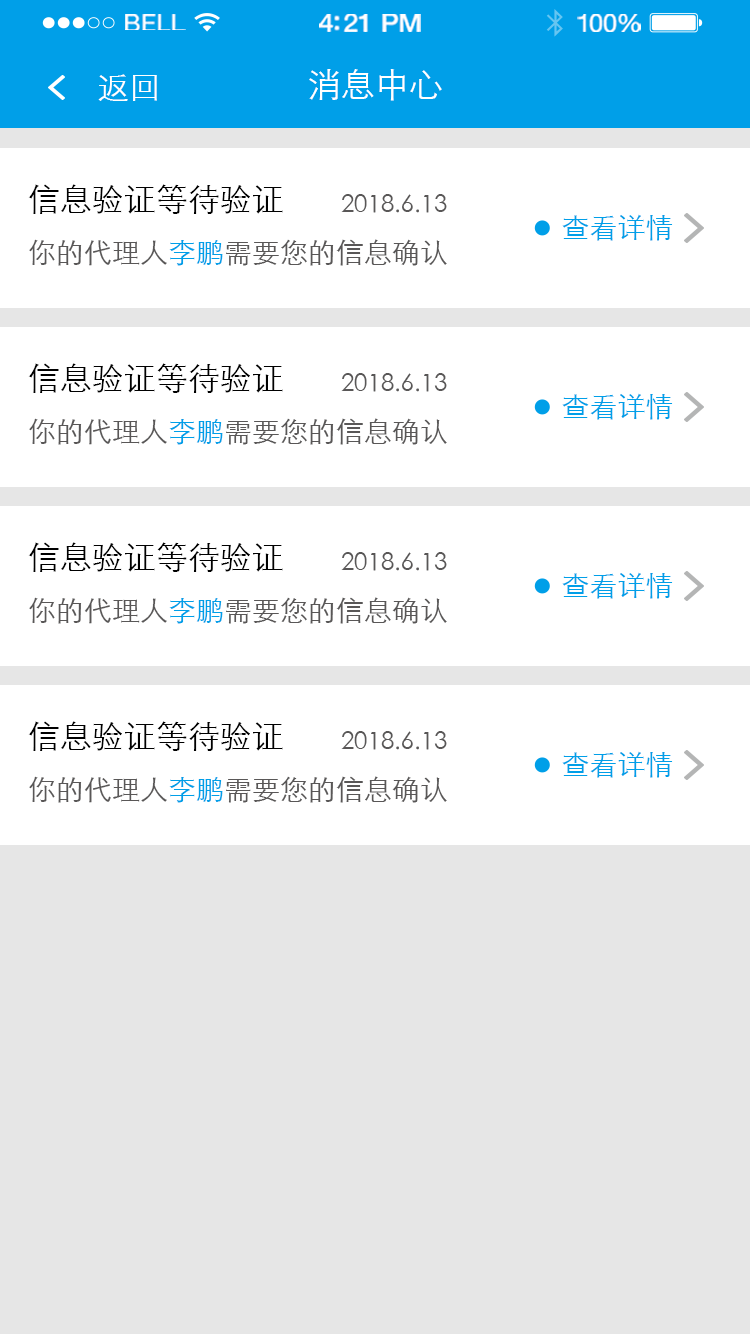
<style>
.page{position:relative;width:750px;height:1334px;background:#ffffff}
.page>*{position:absolute;margin:0}
.t1{font:23.3px "HelveticaNeue";letter-spacing:0.02em;color:#ffffff;scale:1.06 1}
.t2{font:25.3px "HelveticaNeue-Medium";letter-spacing:-0.02em;color:#ffffff;scale:1.06 1}
.t3{font:24.3px "HelveticaNeue";letter-spacing:-0.02em;color:#ffffff;scale:1.06 1}
.t4{font:32px "STXihei";color:#ffffff}
.t5{font:34px "STXihei";color:#ffffff}
.t6{font:32px/56px "STXihei";color:#000000}
.t7{font:28px/56px "STXihei";color:#595757}
.t8{font:28px/56px "STXihei";color:#009fe8}
.t9{font:24px "STXihei";color:#595757}
.t10{font:28px "STXihei";color:#009fe8}
</style>
<div class="page">
<p class="t1" style="left:125px;top:14px;width:61px;height:16px">BELL</p>
<p class="t2" style="left:319px;top:14px;width:102px;height:18px">4:21 PM</p>
<p class="t3" style="left:577px;top:14px;width:64px;height:18px">100%</p>
<p class="t4" style="left:98px;top:74px;width:59px;height:27px">返回</p>
<p class="t5" style="left:309px;top:69px;width:133px;height:32px">消息中心</p>
<p class="t6" style="left:28px;top:184px;width:419px;height:82px">信息验证等待验证<br><span class="t7">你的代理人</span><span class="t8">李鹏</span><span class="t7">需要您的信息确认</span></p>
<p class="t9" style="left:341px;top:194px;width:106px;height:19px">2018.6.13</p>
<p class="t10" style="left:562px;top:214px;width:111px;height:27px">查看详情</p>
<p class="t6" style="left:28px;top:363px;width:419px;height:82px">信息验证等待验证<br><span class="t7">你的代理人</span><span class="t8">李鹏</span><span class="t7">需要您的信息确认</span></p>
<p class="t9" style="left:341px;top:373px;width:106px;height:19px">2018.6.13</p>
<p class="t10" style="left:562px;top:393px;width:111px;height:27px">查看详情</p>
<p class="t6" style="left:28px;top:542px;width:419px;height:82px">信息验证等待验证<br><span class="t7">你的代理人</span><span class="t8">李鹏</span><span class="t7">需要您的信息确认</span></p>
<p class="t9" style="left:341px;top:552px;width:106px;height:19px">2018.6.13</p>
<p class="t10" style="left:562px;top:572px;width:111px;height:27px">查看详情</p>
<p class="t6" style="left:28px;top:721px;width:419px;height:82px">信息验证等待验证<br><span class="t7">你的代理人</span><span class="t8">李鹏</span><span class="t7">需要您的信息确认</span></p>
<p class="t9" style="left:341px;top:731px;width:106px;height:19px">2018.6.13</p>
<p class="t10" style="left:562px;top:751px;width:111px;height:27px">查看详情</p>
</div>
